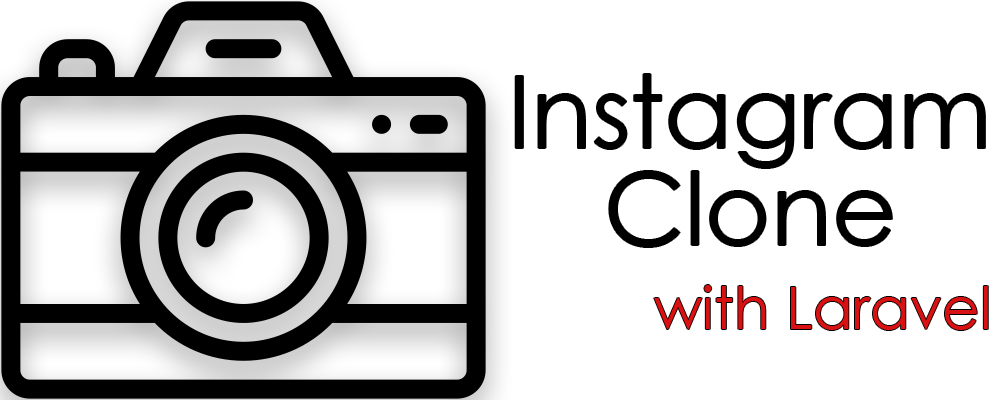
<style>
.page{position:relative;width:1000px;height:400px;background:#ffffff}
.page>*{position:absolute;margin:0}
.t1{font:100px "CenturyGothic";color:#000000}
.t2{font:58.3px "CenturyGothic";color:#d81212}
</style>
<div class="page">
<p class="t1" style="left:515px;top:74px;width:470px;height:94px">Instagram</p>
<p class="t1" style="left:609px;top:171px;width:283px;height:76px">Clone</p>
<p class="t2" style="left:654px;top:285px;width:334px;height:45px">with Laravel</p>
</div>
